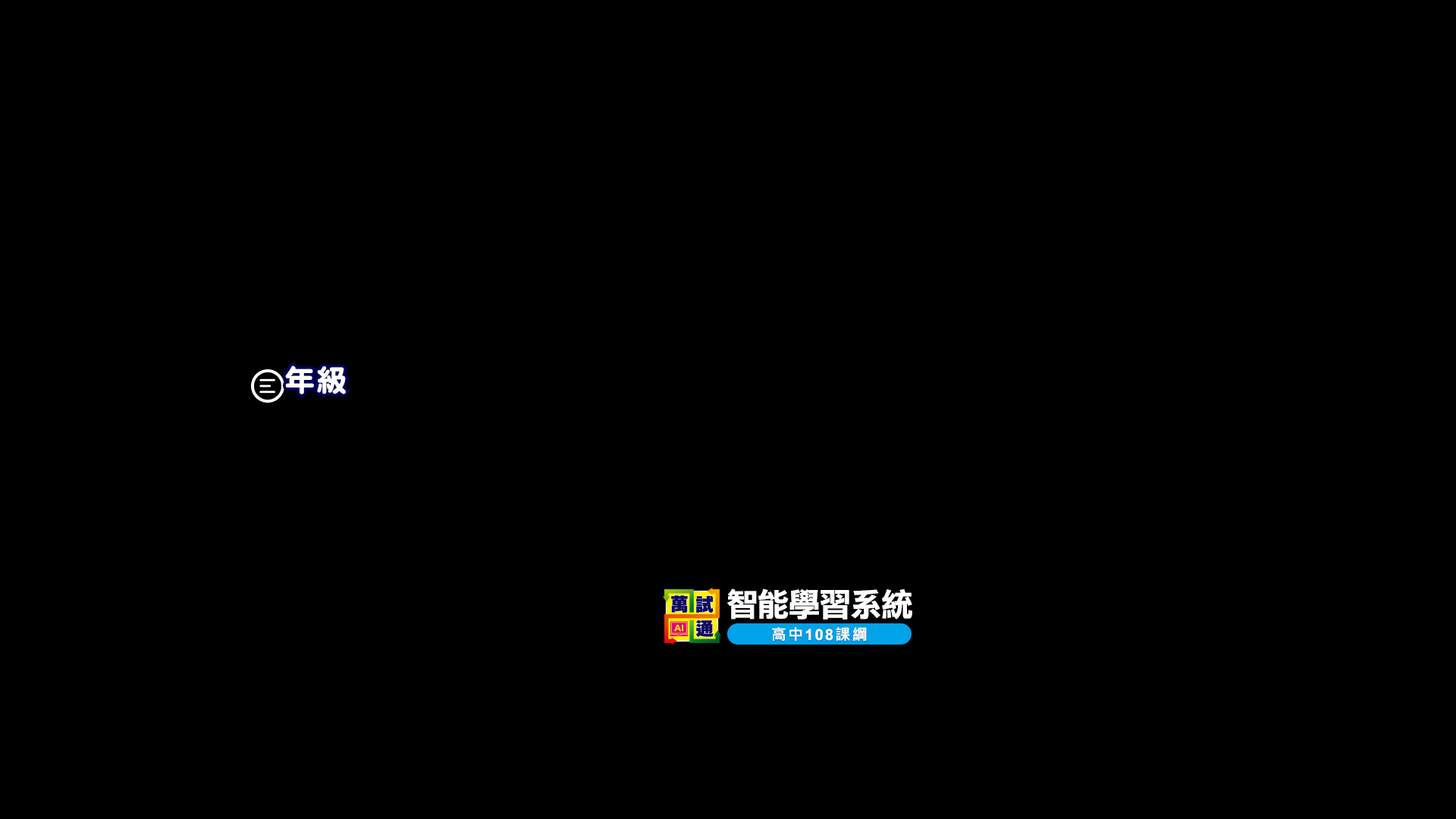
<style>
.page{position:relative;width:1456px;height:819px;background:#000000}
.page>*{position:absolute;margin:0}
.t1{font:30.3px "DFNYuan-W9-WIN-BF";letter-spacing:0.05em;color:#ffffff}
.t2{font:32.5px "DFLiHei-W7-WIN-BF";letter-spacing:-0.05em;color:#ffffff}
.t3{font:15.2px "Arial-BoldMT";letter-spacing:0.1em;color:#ffffff}
.t4{font:15.2px "MicrosoftJhengHeiBold";letter-spacing:0.1em;color:#ffffff}
</style>
<div class="page">
<p class="t1" style="left:285px;top:366px;width:61px;height:28px">年級</p>
<p class="t2" style="left:727px;top:588px;width:185px;height:32px">智能學習系統</p>
<p class="t3" style="left:772px;top:627px;width:95px;height:15px"><span class="t4">高中</span>108<span class="t4">課綱</span></p>
</div>
